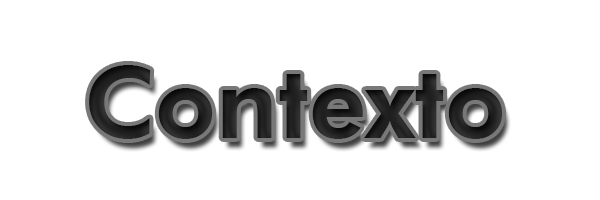
<style>
.page{position:relative;width:600px;height:200px;background:#ffffff}
.page>*{position:absolute;margin:0}
.t1{font:100px "FuturaBT-Heavy";color:#202020}
</style>
<div class="page">
<p class="t1" style="left:89px;top:65px;width:414px;height:74px">Contexto</p>
</div>
